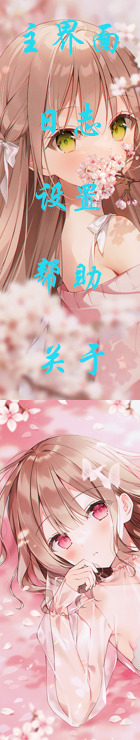
<style>
.page{position:relative;width:140px;height:740px}
.page>*{position:absolute;margin:0}
.t1{font:37.5px "STXingkai";color:#23daf0}
</style>
<div class="page">
<p class="t1" style="left:22px;top:20px;width:97px;height:36px">主界面</p>
<p class="t1" style="left:41px;top:102px;width:61px;height:34px">日志</p>
<p class="t1" style="left:35px;top:182px;width:66px;height:30px">设置</p>
<p class="t1" style="left:33px;top:258px;width:69px;height:36px">帮助</p>
<p class="t1" style="left:41px;top:343px;width:64px;height:33px">关于</p>
</div>
